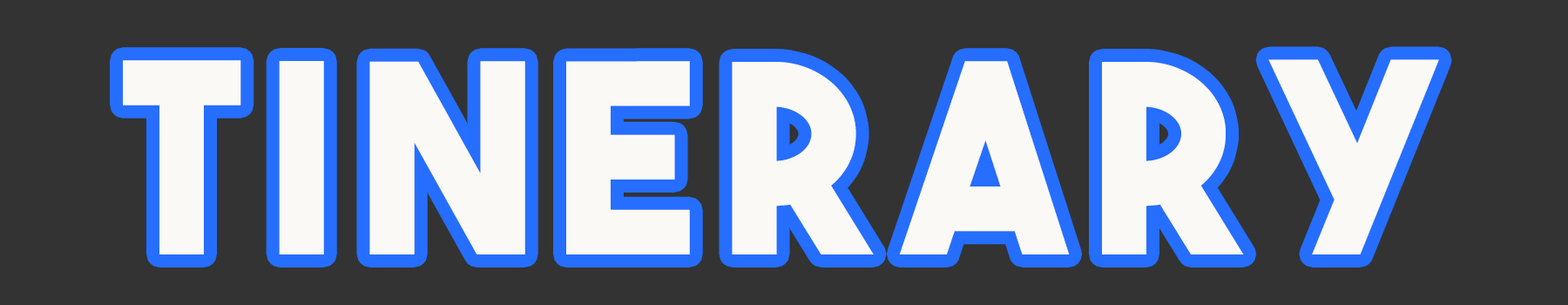
<style>
.page{position:relative;width:1568px;height:305px;background:#333333}
.page>*{position:absolute;margin:0}
.t1{font:262.8px "TheBoldFont";letter-spacing:0.05em;color:#faf9f6;font-weight:bold}
</style>
<div class="page">
<p class="t1" style="left:123px;top:59px;width:1316px;height:195px">Tinerary</p>
</div>
